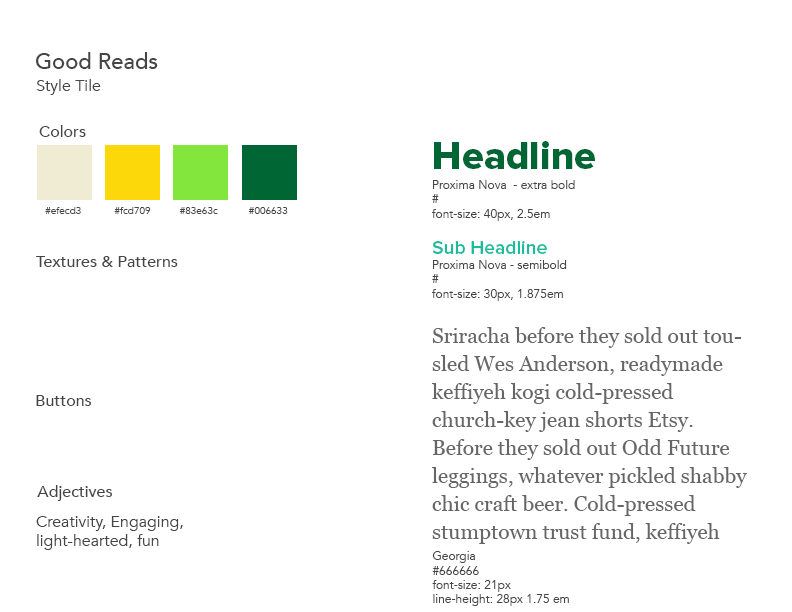
<style>
.page{position:relative;width:792px;height:612px;background:#ffffff}
.page>*{position:absolute;margin:0}
.t1{font:22px "Avenir-Medium";color:#464646}
.t2{font:16px "Avenir-Book";color:#464646}
.t3{font:16px "Avenir-Medium";color:#464646}
.t4{font:40px "ProximaNova-Extrabld";color:#006633}
.t5{font:12px "Avenir-Book";color:#464646}
.t6{font:10px "Avenir-Book";color:#464646}
.t7{font:19.2px "ProximaNova-Semibold";color:#1abc9c}
.t8{font:21px/28px "Georgia";color:#666666}
.t9{font:11.5px/14.4px "Georgia";color:#666666}
.t10{font:11.5px/14.4px "SourceSansPro-Light";color:#464646}
</style>
<div class="page">
<p class="t1" style="left:35px;top:52px;width:123px;height:17px">Good Reads</p>
<p class="t2" style="left:36px;top:79px;width:65px;height:16px">Style Tile</p>
<p class="t3" style="left:39px;top:125px;width:47px;height:12px">Colors</p>
<p class="t4" style="left:434px;top:141px;width:161px;height:28px">Headline</p>
<p class="t5" style="left:432px;top:180px;width:143px;height:41px">Proxima Nova  - extra bold<br>#<br>font-size: 40px, 2.5em</p>
<p class="t6" style="left:45px;top:207px;width:36px;height:7px">#efecd3</p>
<p class="t6" style="left:114px;top:207px;width:37px;height:7px">#fcd709</p>
<p class="t6" style="left:179px;top:207px;width:39px;height:7px">#83e63c</p>
<p class="t6" style="left:248px;top:207px;width:40px;height:7px">#006633</p>
<p class="t5" style="left:432px;top:241px;width:135px;height:60px"><span class="t7">Sub Headline<br></span>Proxima Nova - semibold<br>#<br>font-size: 30px, 1.875em</p>
<p class="t3" style="left:36px;top:256px;width:142px;height:11px">Textures &amp; Patterns</p>
<p class="t8" style="left:431px;top:327px;width:316px;height:217px">Sriracha before they sold out tousled Wes Anderson, readymade keffiyeh kogi cold-pressed church-key jean shorts Etsy. Before they sold out Odd Future leggings, whatever pickled shabby chic craft beer. Cold-pressed stumptown trust fund, keffiyeh tofu seitan pop-up wolf squid kitsch hoodie 3 wolf moon tousled. Meggings <span class="t9">paleo bicycle rights viral messen</span><span class="t10">moon, PBR cray.</span></p>
<p class="t3" style="left:36px;top:395px;width:55px;height:11px">Buttons</p>
<p class="t3" style="left:37px;top:485px;width:75px;height:16px">Adjectives</p>
<p class="t2" style="left:36px;top:516px;width:147px;height:34px">Creativity, Engaging, light-hearted, fun</p>
<p class="t5" style="left:432px;top:551px;width:137px;height:55px">Georgia<br>#666666<br>font-size: 21px <br>line-height: 28px 1.75 em</p>
</div>
